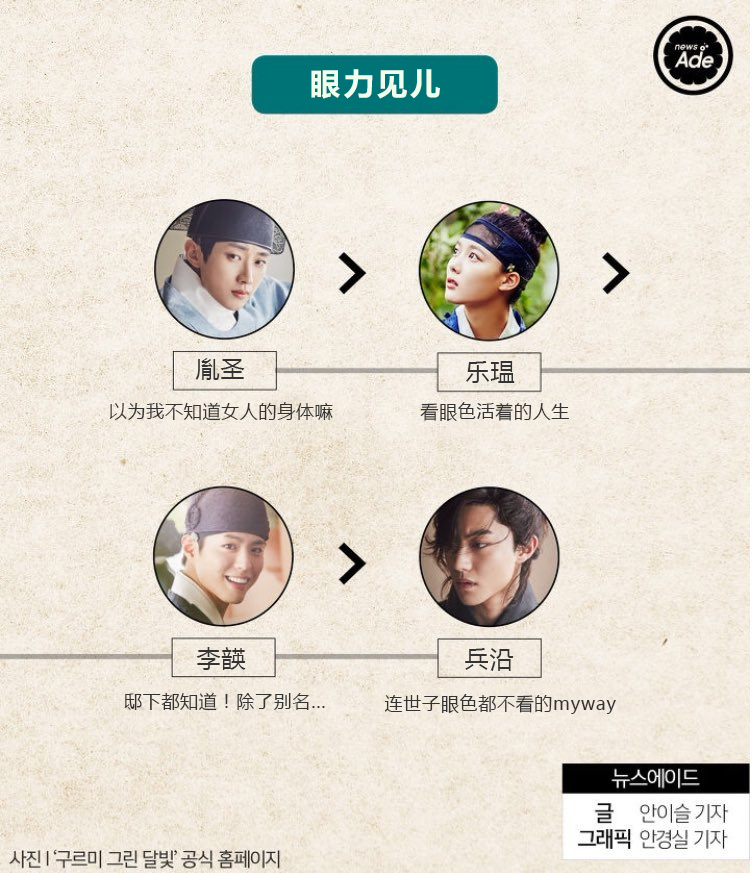
<style>
.page{position:relative;width:752px;height:873px}
.page>*{position:absolute;margin:0}
.t1{font:32px "FZLTCHK--GBK1-0";letter-spacing:0.04em;color:#efffee}
.t2{font:24px "MicrosoftYaHei";letter-spacing:0.04em;color:#333333}
.t3{font:18px "MicrosoftYaHei";letter-spacing:0.04em;color:#333333}
</style>
<div class="page">
<p class="t1" style="left:311px;top:69px;width:129px;height:30px">眼力见儿</p>
<p class="t2" style="left:195px;top:358px;width:50px;height:22px">胤圣</p>
<p class="t2" style="left:466px;top:361px;width:49px;height:22px">乐瑥</p>
<p class="t3" style="left:109px;top:402px;width:224px;height:19px">以为我不知道女人的身体嘛</p>
<p class="t3" style="left:420px;top:402px;width:149px;height:19px">看眼色活着的人生</p>
<p class="t2" style="left:196px;top:647px;width:50px;height:23px">李韺</p>
<p class="t2" style="left:465px;top:648px;width:49px;height:23px">兵沿</p>
<p class="t3" style="left:124px;top:692px;width:201px;height:19px">邸下都知道！除了别名...</p>
<p class="t3" style="left:384px;top:694px;width:232px;height:20px">连世子眼色都不看的myway</p>
</div>
